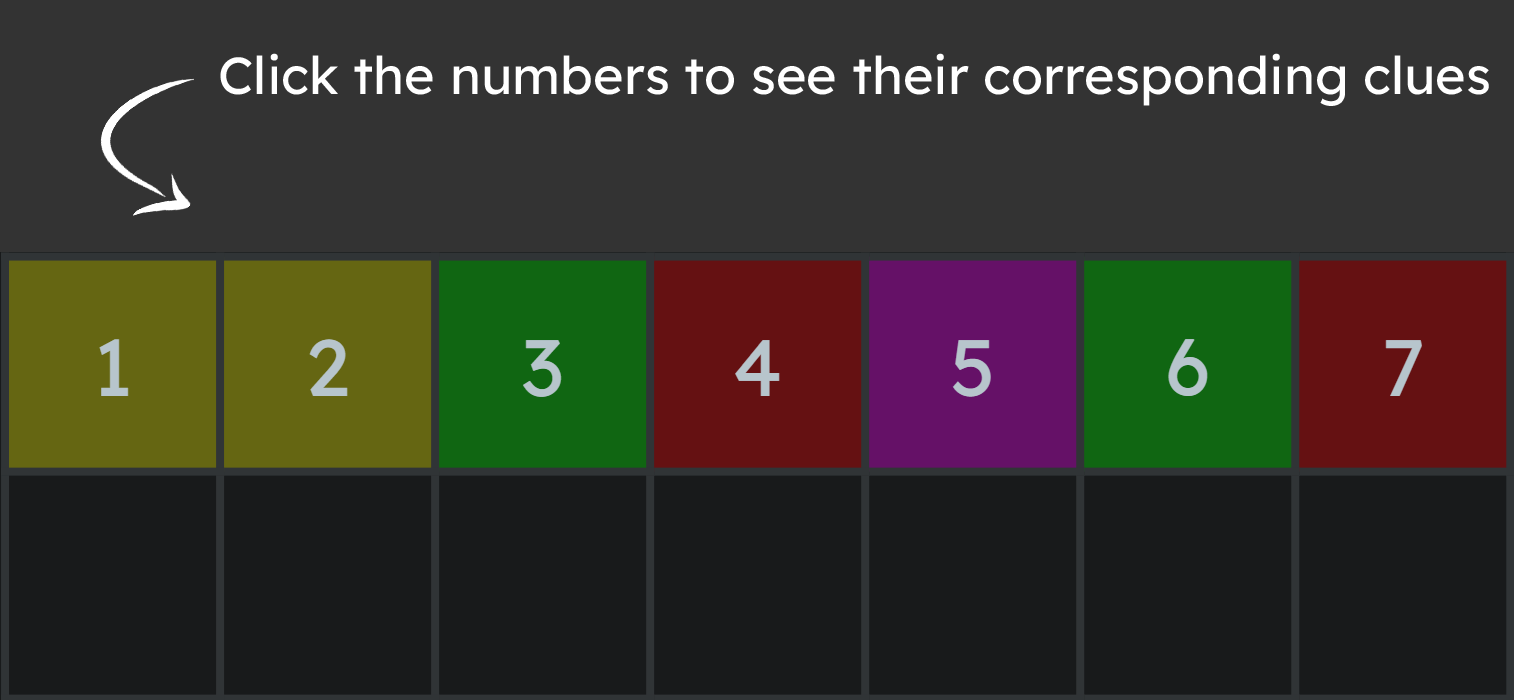
<style>
.page{position:relative;width:1514px;height:700px;background:#333333}
.page>*{position:absolute;margin:0}
.t1{font:52.2px "LexendDeca-Regular";color:#ffffff}
</style>
<div class="page">
<p class="t1" style="left:220px;top:53px;width:1269px;height:53px">Click the numbers to see their corresponding clues</p>
</div>
